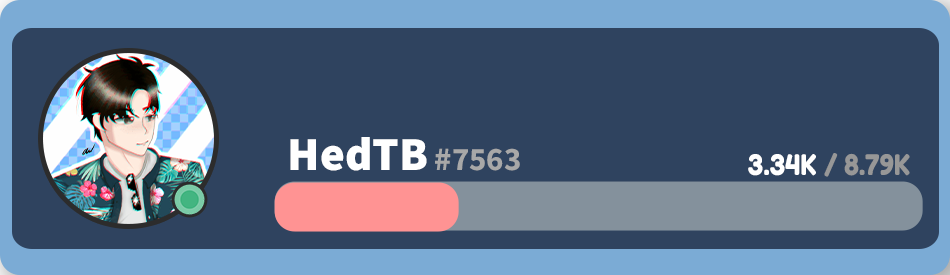
<style>
.page{position:relative;width:950px;height:275px;background:#2f435f}
.page>*{position:absolute;margin:0}
.t1{font:47.4px "SourceSansPro-Black";color:#ffffff}
.t2{font:32.8px "SourceSansPro-Bold";color:#a8a8a8}
.t3{font:28.2px "FredokaOne-Regular";color:#ffffff;scale:0.91 1}
.t4{font:28.2px "FredokaOne-Regular";color:#979797;scale:0.91 1}
</style>
<div class="page">
<p class="t1" style="left:290px;top:137px;width:137px;height:34px">HedTB</p>
<p class="t2" style="left:435px;top:148px;width:85px;height:23px">#7563</p>
<p class="t3" style="left:748px;top:154px;width:68px;height:22px">3.34K</p>
<p class="t4" style="left:824px;top:153px;width:86px;height:24px">/ 8.79K</p>
</div>
